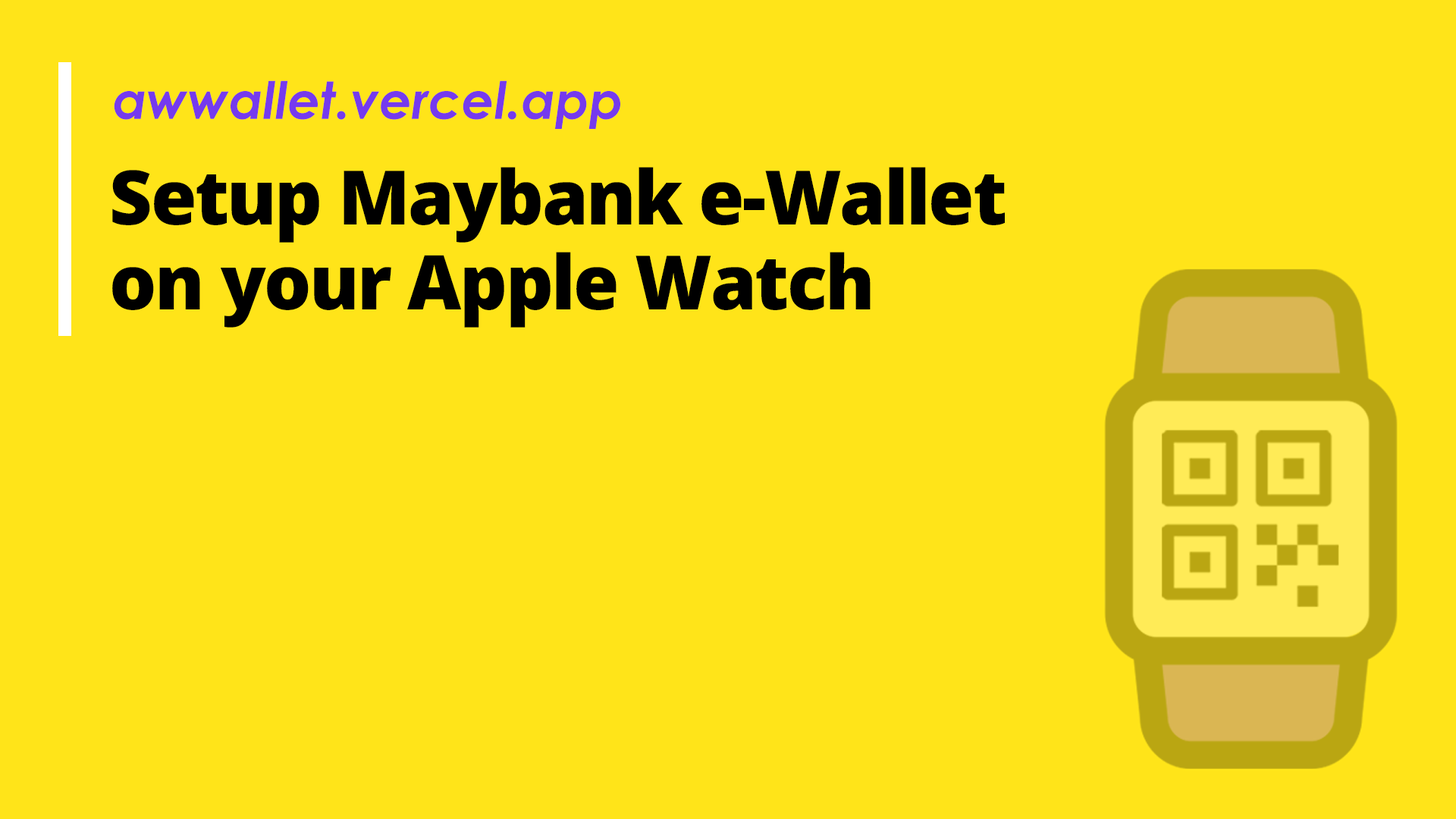
<style>
.page{position:relative;width:1456px;height:819px;background:#ffe419}
.page>*{position:absolute;margin:0}
.t1{font:51.4px "CenturyGothic-BoldItalic";color:#753aee}
.t2{font:75.2px/84.8px "OpenSansRoman-ExtraBold";letter-spacing:-0.025em;color:#000000}
</style>
<div class="page">
<p class="t1" style="left:114px;top:80px;width:506px;height:49px">awwallet.vercel.app</p>
<p class="t2" style="left:112px;top:167px;width:893px;height:161px">Setup Maybank e-Wallet<br>on your Apple Watch</p>
</div>
